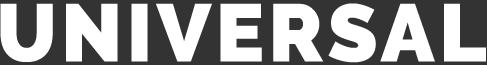
<style>
.page{position:relative;width:487px;height:65px;background:#333333}
.page>*{position:absolute;margin:0}
.t1{font:81px "Raleway-Black";letter-spacing:0.055em;color:#ffffff;text-transform:uppercase}
</style>
<div class="page">
<p class="t1" style="left:0px;top:3px;width:486px;height:60px">universal</p>
</div>
